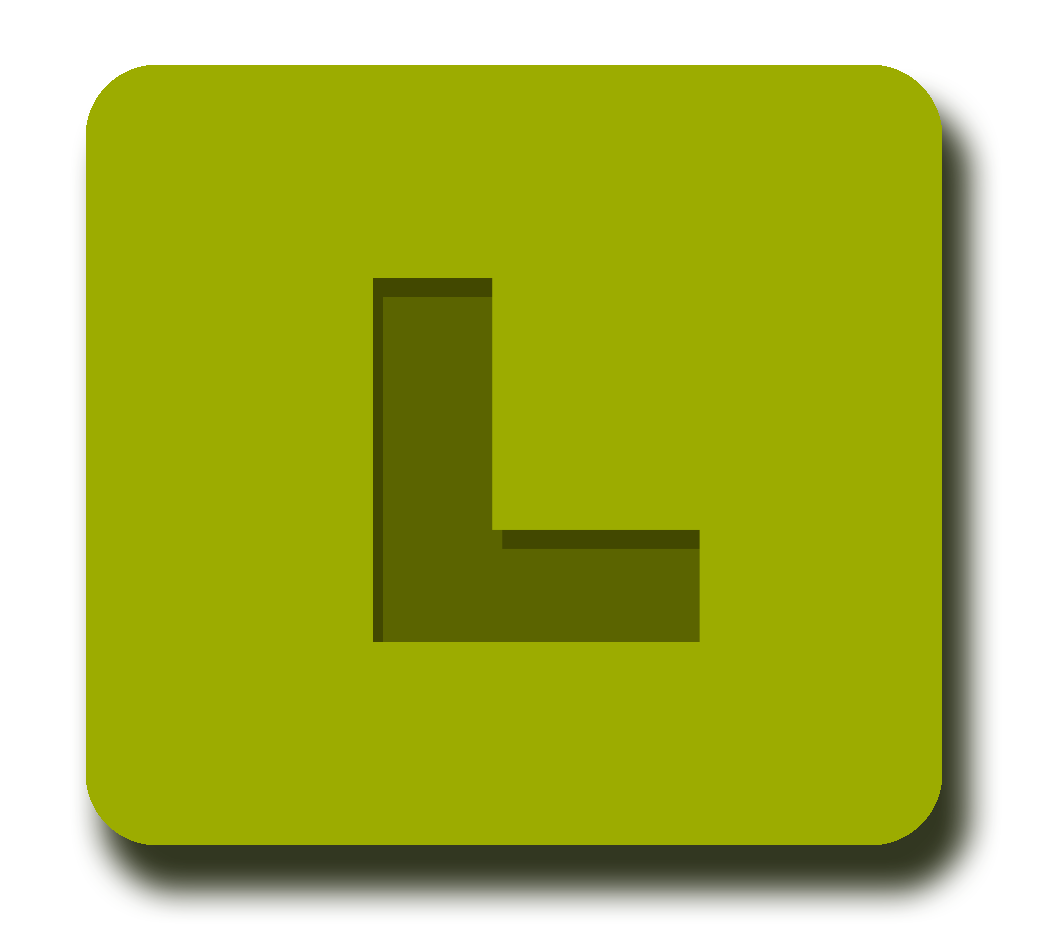
<style>
.page{position:relative;width:1053px;height:930px;background:#9cac00}
.page>*{position:absolute;margin:0}
.t1{font:504.7px "BadTyp-Regular";color:#5b6400}
</style>
<div class="page">
<p class="t1" style="left:373px;top:278px;width:327px;height:364px">L</p>
</div>
